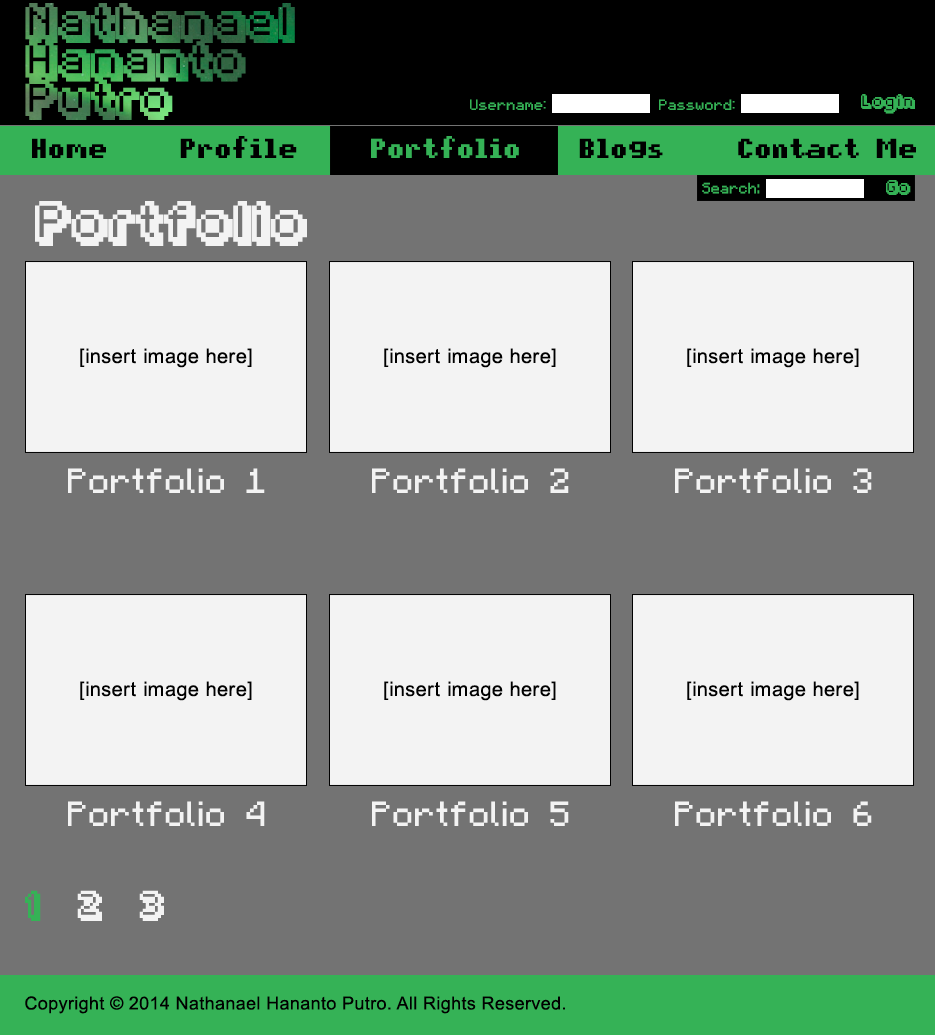
<style>
.page{position:relative;width:935px;height:1035px;background:#737373}
.page>*{position:absolute;margin:0}
.t1{font:32px "Fipps-Regular";letter-spacing:0.02em}
.t2{font:12px "pixelmix";letter-spacing:0.02em;color:#35b256}
.t3{font:12px "Fipps-Regular";letter-spacing:0.02em;color:#35b256}
.t4{font:22px "pixelmix-bold";letter-spacing:0.02em;color:#000000}
.t5{font:22px "pixelmix-bold";letter-spacing:0.02em;color:#35b256}
.t6{font:12px "Minecraftia";letter-spacing:0.02em;color:#35b256}
.t7{font:36px "Fipps-Regular";letter-spacing:0.02em;color:#f3f3f3}
.t8{font:20px "ArialMT";letter-spacing:0.02em;color:#000000}
.t9{font:28px "Minecraftia";letter-spacing:0.02em;color:#f3f3f3}
.t10{font:24px "Fipps-Regular";letter-spacing:0.02em;color:#f3f3f3}
.t11{font:24px "Fipps-Regular";letter-spacing:0.02em;color:#35b256}
.t12{font:18px "ArialMT";letter-spacing:0.02em;color:#000000}
</style>
<div class="page">
<p class="t1" style="left:25px;top:3px;width:270px;height:117px">Nathanael<br>Hananto<br>Putro</p>
<p class="t2" style="left:470px;top:99px;width:76px;height:11px">Username:</p>
<p class="t2" style="left:659px;top:99px;width:76px;height:11px">Password:</p>
<p class="t3" style="left:861px;top:94px;width:54px;height:20px">Login</p>
<p class="t4" style="left:32px;top:136px;width:884px;height:22px">Home     Profile     <span class="t5">Portfolio</span>    Blogs     Contact Me</p>
<p class="t6" style="left:702px;top:182px;width:58px;height:12px">Search:</p>
<p class="t3" style="left:886px;top:180px;width:25px;height:15px">Go</p>
<p class="t7" style="left:35px;top:201px;width:272px;height:45px">Portfolio</p>
<p class="t8" style="left:80px;top:348px;width:172px;height:20px">[insert image here]</p>
<p class="t8" style="left:384px;top:348px;width:172px;height:20px">[insert image here]</p>
<p class="t8" style="left:687px;top:348px;width:172px;height:20px">[insert image here]</p>
<p class="t9" style="left:68px;top:468px;width:197px;height:25px">Portfolio 1</p>
<p class="t9" style="left:372px;top:468px;width:197px;height:25px">Portfolio 2</p>
<p class="t9" style="left:675px;top:468px;width:197px;height:25px">Portfolio 3</p>
<p class="t8" style="left:80px;top:681px;width:172px;height:20px">[insert image here]</p>
<p class="t8" style="left:384px;top:681px;width:172px;height:20px">[insert image here]</p>
<p class="t8" style="left:687px;top:681px;width:172px;height:20px">[insert image here]</p>
<p class="t9" style="left:68px;top:801px;width:197px;height:25px">Portfolio 4</p>
<p class="t9" style="left:372px;top:801px;width:197px;height:25px">Portfolio 5</p>
<p class="t9" style="left:675px;top:801px;width:197px;height:25px">Portfolio 6</p>
<p class="t10" style="left:25px;top:890px;width:139px;height:31px"><span class="t11">1</span>   2   3</p>
<p class="t12" style="left:25px;top:996px;width:540px;height:18px">Copyright © 2014 Nathanael Hananto Putro. All Rights Reserved.</p>
</div>
